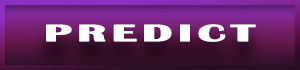
<style>
.page{position:relative;width:300px;height:70px}
.page>*{position:absolute;margin:0}
.t1{font:23.8px "BritannicBold";letter-spacing:0.1em;color:#ffffff;font-weight:bold;scale:1.92 1}
</style>
<div class="page">
<p class="t1" style="left:46px;top:24px;width:210px;height:18px">PREDICT</p>
</div>
